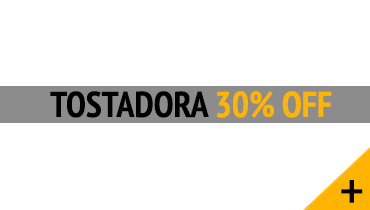
<style>
.page{position:relative;width:370px;height:210px;background:#ffffff}
.page>*{position:absolute;margin:0}
.t1{font:36px "PTSans-NarrowBold";color:#000000}
.t2{font:36px "PTSans-NarrowBold";color:#ffb400}
.t3{font:60px "PTSans-Narrow";color:#000000}
</style>
<div class="page">
<p class="t1" style="left:50px;top:91px;width:282px;height:27px">TOSTADORA<span class="t2"> 30% OFF</span></p>
<p class="t3" style="left:341px;top:180px;width:22px;height:23px">+</p>
</div>
